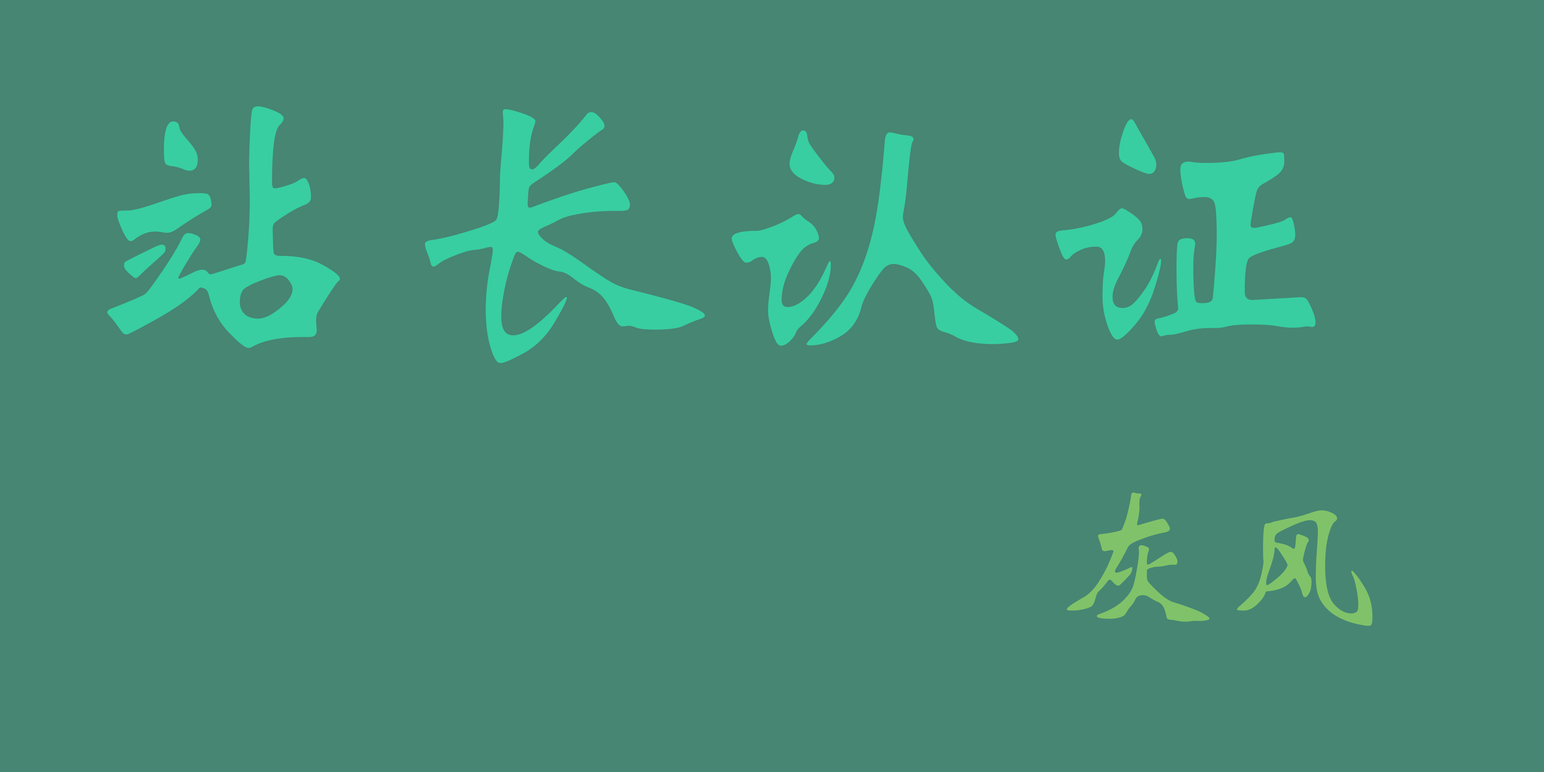
<style>
.page{position:relative;width:1544px;height:772px;background:#468673}
.page>*{position:absolute;margin:0}
.t1{font:321.7px "STXinwei";color:#38cea1}
.t2{font:160.9px "STXinwei";color:#80c269}
</style>
<div class="page">
<p class="t1" style="left:107px;top:106px;width:1209px;height:257px">站长认证</p>
<p class="t2" style="left:1067px;top:492px;width:306px;height:134px">灰风</p>
</div>
